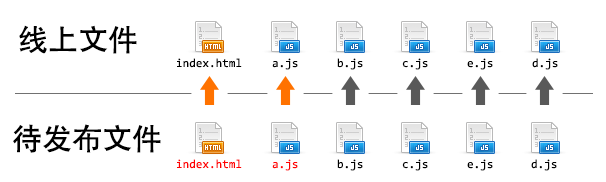
<style>
.page{position:relative;width:606px;height:182px;background:#ffffff}
.page>*{position:absolute;margin:0}
.t1{font:30px "AdobeHeitiStd-Regular";color:#000000}
.t2{font:12px "Consolas";color:#000000}
.t3{font:12px "Consolas";color:#ff0000}
.t4{font:12px "Consolas";color:#ff0101}
</style>
<div class="page">
<p class="t1" style="left:19px;top:25px;width:118px;height:29px">线上文件</p>
<p class="t2" style="left:177px;top:58px;width:65px;height:10px">index.html</p>
<p class="t2" style="left:272px;top:58px;width:26px;height:12px">a.js</p>
<p class="t2" style="left:337px;top:58px;width:26px;height:12px">b.js</p>
<p class="t2" style="left:402px;top:58px;width:26px;height:12px">c.js</p>
<p class="t2" style="left:467px;top:58px;width:26px;height:12px">e.js</p>
<p class="t2" style="left:532px;top:58px;width:26px;height:12px">d.js</p>
<p class="t1" style="left:13px;top:124px;width:148px;height:29px">待发布文件</p>
<p class="t3" style="left:177px;top:159px;width:65px;height:10px">index.html</p>
<p class="t4" style="left:272px;top:159px;width:26px;height:12px">a.js</p>
<p class="t2" style="left:337px;top:159px;width:26px;height:12px">b.js</p>
<p class="t2" style="left:402px;top:159px;width:26px;height:12px">c.js</p>
<p class="t2" style="left:467px;top:159px;width:26px;height:12px">e.js</p>
<p class="t2" style="left:531px;top:159px;width:26px;height:12px">d.js</p>
</div>
